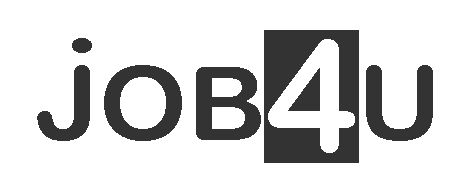
<style>
.page{position:relative;width:473px;height:188px;background:#ffffff}
.page>*{position:absolute;margin:0}
.t1{font:102.8px "ArialRoundedMTBold";color:#333333;scale:1.08 1}
.t2{font:140.5px "ArialRoundedMTBold";color:#333333;scale:1.08 1}
.t3{font:102.2px "ArialRoundedMTBold";color:#333333;scale:1.33 1}
.t4{font:154px "ArialRoundedMTBold";color:#ffffff}
</style>
<div class="page">
<p class="t1" style="left:37px;top:38px;width:396px;height:104px">JOB<span class="t2">4</span>U</p>
<p class="t3" style="left:72px;top:38px;width:20px;height:15px">.</p>
<p class="t4" style="left:268px;top:39px;width:87px;height:114px">4</p>
</div>
